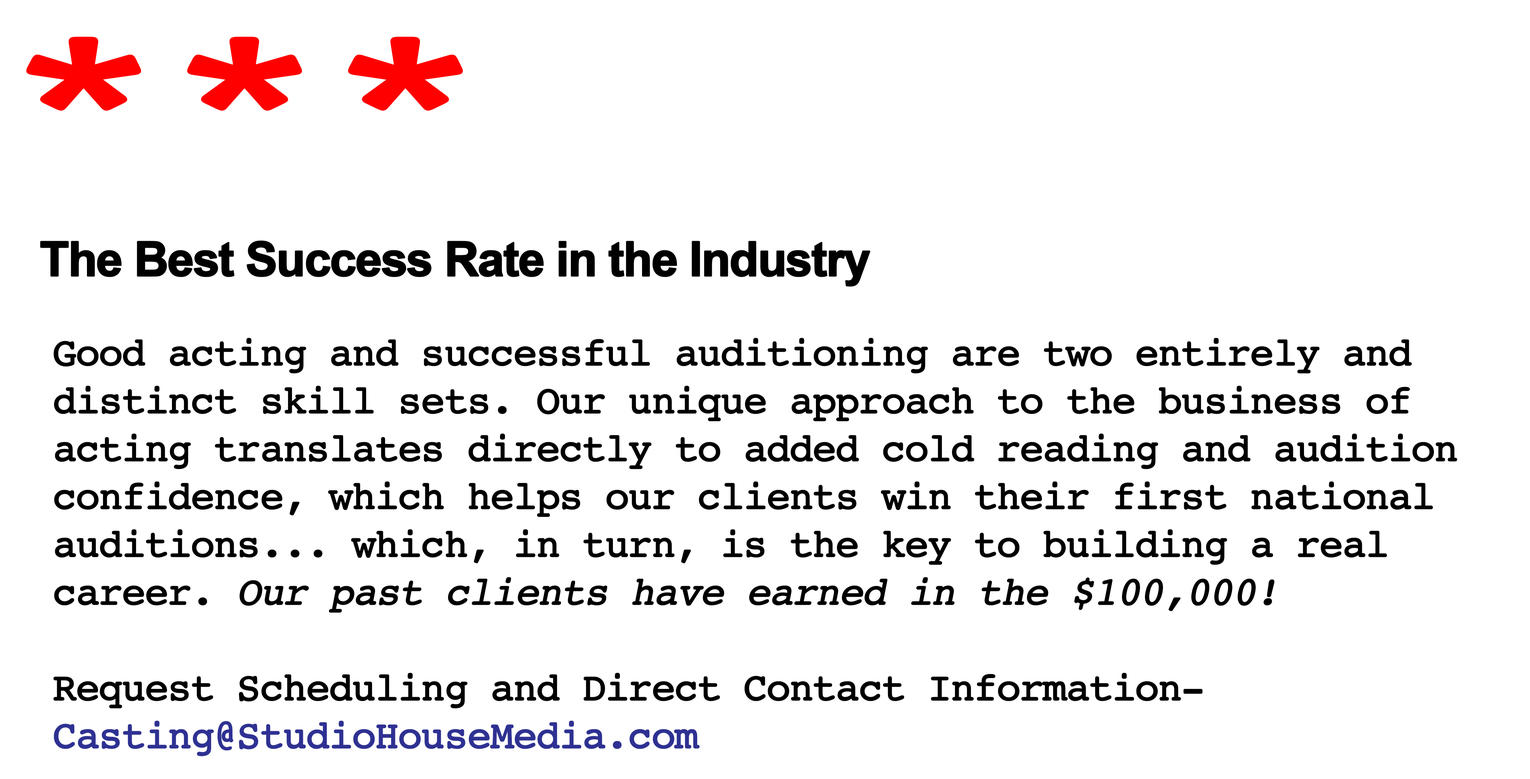
<style>
.page{position:relative;width:1530px;height:779px;background:#ffffff}
.page>*{position:absolute;margin:0}
.t1{font:47.9px "Arial-BoldMT";letter-spacing:-0.05em;color:#000000;font-weight:bold}
.t2{font:39.9px "Courier";letter-spacing:-0.05em;color:#000000;font-weight:bold}
.t3{font:39.9px "Courier";letter-spacing:-0.05em;color:#000000;font-weight:bold;font-style:italic}
.t4{font:39.9px "Courier";letter-spacing:-0.05em;color:#2e3192;font-weight:bold}
</style>
<div class="page">
<p class="t1" style="left:40px;top:241px;width:831px;height:46px">The Best Success Rate in the Industry</p>
<p class="t2" style="left:53px;top:338px;width:1404px;height:419px">Good acting and successful auditioning are two entirely and distinct skill sets. Our unique approach to the business of acting translates directly to added cold reading and audition confidence, which helps our clients win their first national auditions... which, in turn, is the key to building a real career. <span class="t3">Our past clients have earned in the $100,000!<br><br></span>Request Scheduling and Direct Contact Information-<br><span class="t4">Casting@StudioHouseMedia.com</span></p>
</div>
